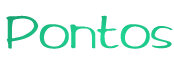
<style>
.page{position:relative;width:174px;height:73px;background:#ffffff}
.page>*{position:absolute;margin:0}
.t1{font:48px "Arctic2";color:#1dc688}
</style>
<div class="page">
<p class="t1" style="left:6px;top:15px;width:167px;height:34px">Pontos</p>
</div>
